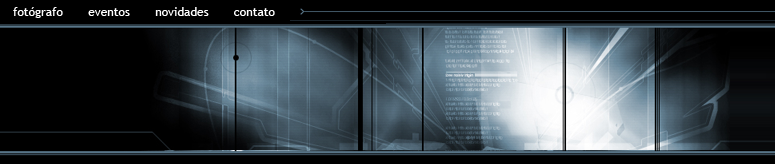
<style>
.page{position:relative;width:775px;height:164px;background:#000000}
.page>*{position:absolute;margin:0}
.t1{font:12px "TrebuchetMS";color:#ffffff}
</style>
<div class="page">
<p class="t1" style="left:13px;top:7px;width:262px;height:11px">fotógrafo       eventos       novidades       contato</p>
</div>
